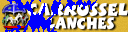
<style>
.page{position:relative;width:128px;height:32px}
.page>*{position:absolute;margin:0}
.t1{font:18.2px "BoinkStd";letter-spacing:-0.03em;color:#ffffff;scale:1.1 1}
.t2{font:16.8px "BoinkStd";letter-spacing:-0.025em;color:#ffffff;scale:1.03 1}
</style>
<div class="page">
<p class="t1" style="left:27px;top:3px;width:101px;height:13px">Carrossel</p>
<p class="t2" style="left:47px;top:17px;width:67px;height:12px">lanches</p>
</div>
